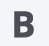
<style>
.page{position:relative;width:49px;height:46px;background:#f4f5f9}
.page>*{position:absolute;margin:0}
.t1{font:36px "OpenSans-Bold";letter-spacing:0.025em;color:#4c4d55;font-weight:bold}
</style>
<div class="page">
<p class="t1" style="left:14px;top:11px;width:20px;height:27px">B</p>
</div>
